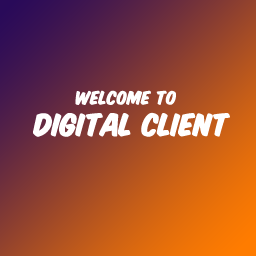
<style>
.page{position:relative;width:256px;height:256px}
.page>*{position:absolute;margin:0}
.t1{font:15px "KomikaTitle-Paint";color:#ffffff}
.t2{font:25px "KomikaTitle-Paint";color:#ffffff}
</style>
<div class="page">
<p class="t1" style="left:75px;top:90px;width:102px;height:16px">WELCOME TO</p>
<p class="t2" style="left:32px;top:112px;width:198px;height:25px">DIGITAL CLIENT</p>
</div>
